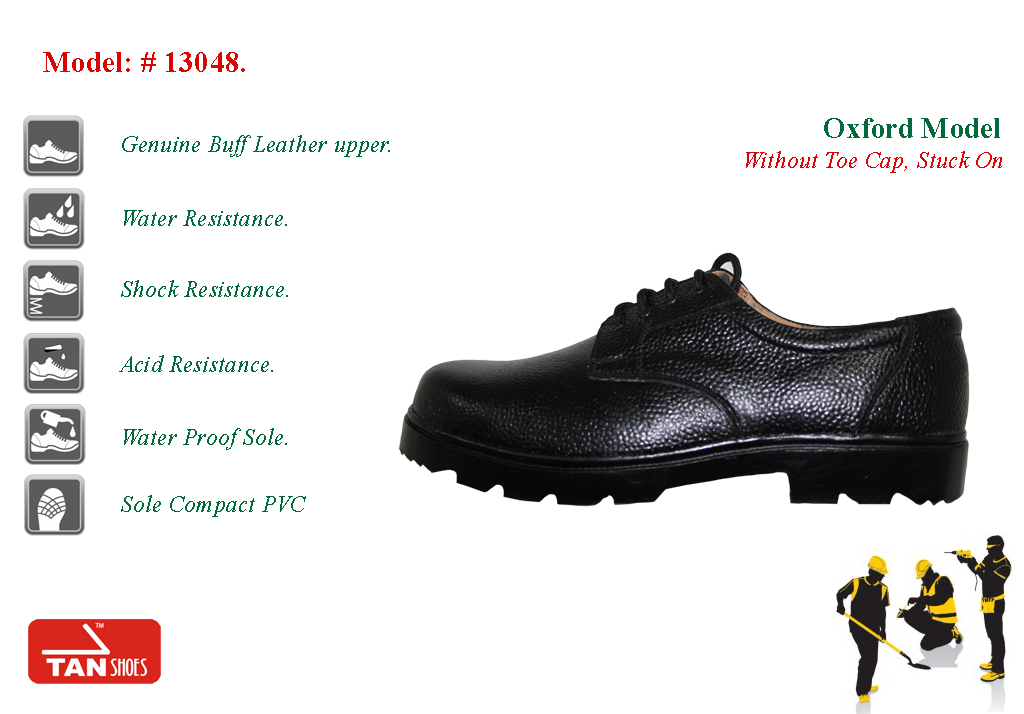
<style>
.page{position:relative;width:1024px;height:714px;background:#ffffff}
.page>*{position:absolute;margin:0}
.t1{font:30px "TimesNewRomanPS-BoldMT";letter-spacing:0.01em;color:#d80505;scale:0.95 1}
.t2{font:30px "TimesNewRomanPS-BoldMT";letter-spacing:0.01em;color:#026a3a;scale:0.95 1}
.t3{font:24px "TimesNewRomanPS-ItalicMT";letter-spacing:0.01em;color:#026a3a;scale:0.95 1}
.t4{font:24px "TimesNewRomanPS-ItalicMT";letter-spacing:0.01em;color:#dc0207;scale:0.95 1}
</style>
<div class="page">
<p class="t1" style="left:43px;top:52px;width:202px;height:20px">Model: # 13048.</p>
<p class="t2" style="left:824px;top:118px;width:176px;height:20px">Oxford Model</p>
<p class="t3" style="left:122px;top:135px;width:268px;height:22px">Genuine Buff Leather upper.</p>
<p class="t4" style="left:746px;top:151px;width:256px;height:22px">Without Toe Cap, Stuck On</p>
<p class="t3" style="left:124px;top:210px;width:163px;height:16px">Water Resistance.</p>
<p class="t3" style="left:121px;top:280px;width:167px;height:17px">Shock Resistance.</p>
<p class="t3" style="left:119px;top:355px;width:154px;height:17px">Acid Resistance.</p>
<p class="t3" style="left:124px;top:428px;width:163px;height:22px">Water Proof Sole.</p>
<p class="t3" style="left:121px;top:495px;width:185px;height:22px">Sole Compact PVC</p>
</div>
